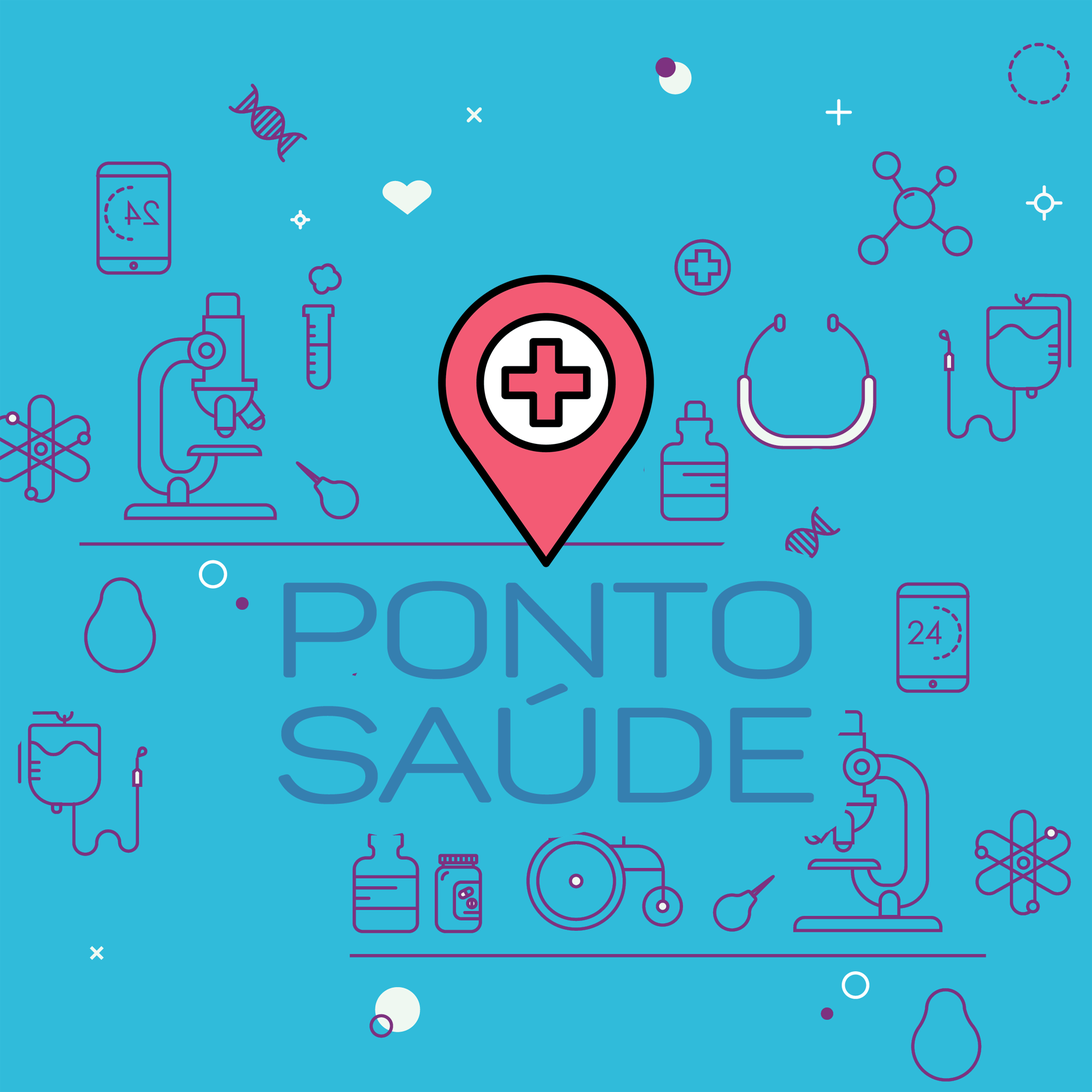
<style>
.page{position:relative;width:1092px;height:1092px;background:#30bbda}
.page>*{position:absolute;margin:0}
.t1{font:128px/125px "Panton-LightCaps";letter-spacing:-0.04em;color:#357fb0;font-weight:bold;scale:1.39 1}
</style>
<div class="page">
<p class="t1" style="left:278px;top:581px;width:536px;height:223px;text-align:center">Ponto<br>SaÚde</p>
</div>
